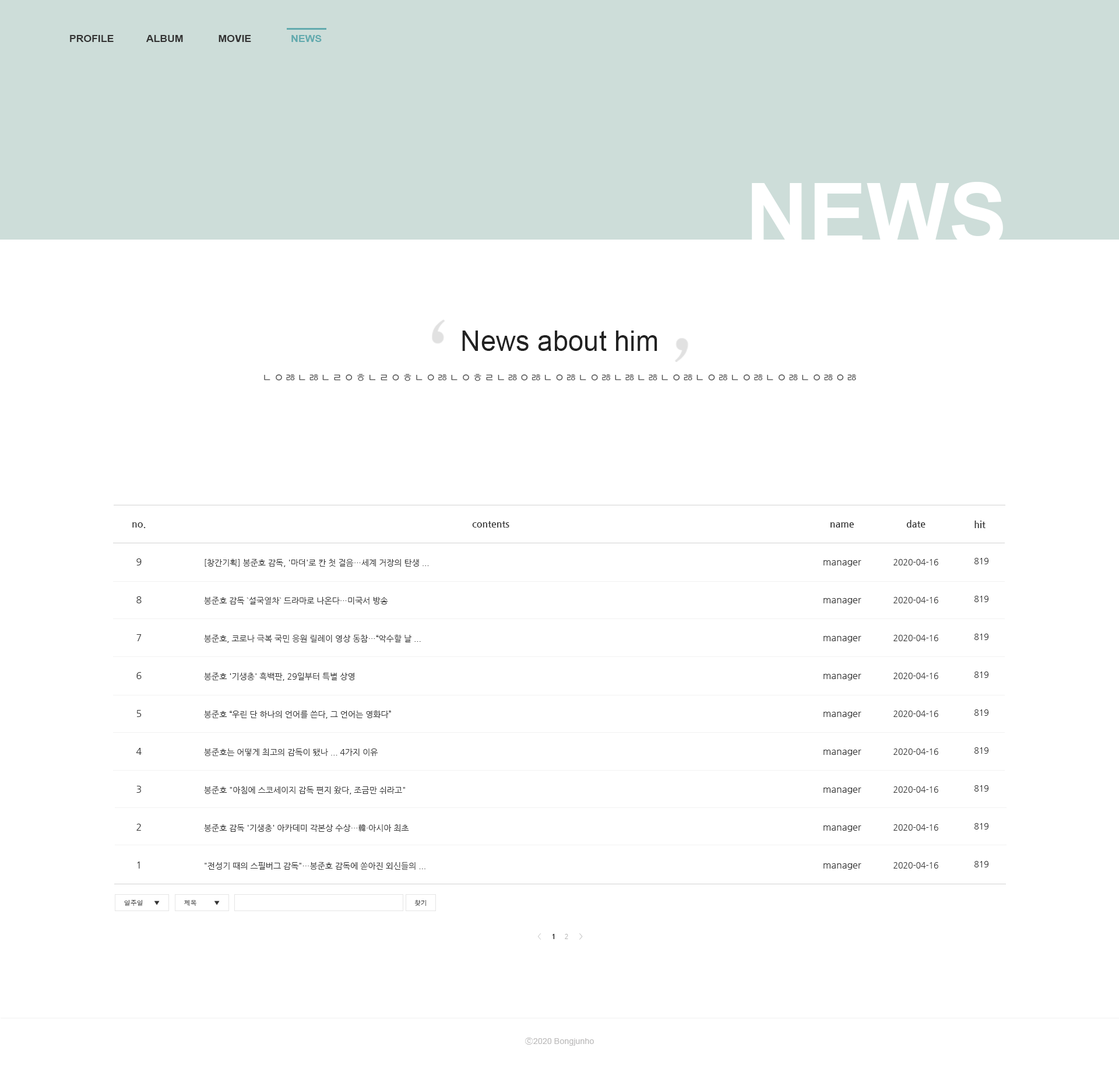
<style>
.page{position:relative;width:1119px;height:1065px;background:#ffffff}
.page>*{position:absolute;margin:0}
.t1{font:10.1px "Arial-BoldMT";color:#333333}
.t2{font:10.1px "Arial-BoldMT";color:#62aaae}
.t3{font:87.5px "Arial-BoldMT";color:#ffffff}
.t4{font:27.7px "ArialMT";color:#222222}
.t5{font:12.4px "NanumGothic";color:#555555}
.t6{font:9.3px "NanumGothicBold";color:#333333}
.t7{font:8.2px/18.9px "NanumGothic";color:#333333}
.t8{font:9.3px/18.9px "NanumGothicBold";color:#333333}
.t9{font:9.3px/17.5px "NanumGothicBold";color:#333333}
.t10{font:9.3px/18.9px "NanumGothic";color:#333333}
.t11{font:6.4px "Dotum";color:#333333}
.t12{font:6.4px "NanumGothic";color:#c8c8c8}
.t13{font:6.4px "NanumGothicExtraBold";color:#333333}
.t14{font:6.4px "NanumGothic";color:#b7b7b7}
.t15{font:6.4px "NanumGothic";color:#bdbdbd}
.t16{font:8.2px "ArialMT";color:#bcbbbb}
.t17{font:8.2px "Gulim";color:#bcbbbb}
</style>
<div class="page">
<p class="t1" style="left:70px;top:35px;width:44px;height:7px">PROFILE</p>
<p class="t1" style="left:146px;top:35px;width:37px;height:7px">ALBUM</p>
<p class="t1" style="left:219px;top:35px;width:32px;height:7px">MOVIE</p>
<p class="t2" style="left:292px;top:35px;width:30px;height:7px">NEWS</p>
<p class="t3" style="left:752px;top:182px;width:251px;height:65px">NEWS</p>
<p class="t4" style="left:462px;top:331px;width:196px;height:20px">News about him</p>
<p class="t5" style="left:264px;top:374px;width:592px;height:7px">ㄴㅇㅀㄴㅀㄴㄹㅇㅎㄴㄹㅇㅎㄴㅇㅀㄴㅇㅎㄹㄴㅀㅇㅀㄴㅇㅀㄴㅇㅀㄴㅀㄴㅀㄴㅇㅀㄴㅇㅀㄴㅇㅀㄴㅇㅀㄴㅇㅀㅇㅀ</p>
<p class="t6" style="left:472px;top:521px;width:38px;height:7px">contents</p>
<p class="t7" style="left:894px;top:520px;width:45px;height:349px;text-align:center"><span class="t8">date<br><br></span>2020-04-16<br><br>2020-04-16<br><br>2020-04-16<br><br>2020-04-16<br><br>2020-04-16<br><br>2020-04-16<br><br>2020-04-16<br><br>2020-04-16<br><br>2020-04-16</p>
<p class="t7" style="left:975px;top:521px;width:14px;height:347px"><span class="t9">hit<br><br></span>819<br><br>819<br><br>819<br><br>819<br><br>819<br><br>819<br><br>819<br><br>819<br><br>819</p>
<p class="t10" style="left:132px;top:522px;width:14px;height:347px;text-align:center"><span class="t8">no.<br></span><br>9<br><br>8<br><br>7<br><br>6<br><br>5<br><br>4<br><br>3<br><br>2<br><br>1</p>
<p class="t10" style="left:824px;top:522px;width:38px;height:348px;text-align:center"><span class="t8">name<br><br></span>manager<br><br>manager<br><br>manager<br><br>manager<br><br>manager<br><br>manager<br><br>manager<br><br>manager<br><br>manager</p>
<p class="t7" style="left:204px;top:559px;width:225px;height:311px">[창간기획] 봉준호 감독, '마더'로 칸 첫 걸음…세계 거장의 탄생 ...<br><br>봉준호 감독 `설국열차` 드라마로 나온다…미국서 방송<br><br>봉준호, 코로나 극복 국민 응원 릴레이 영상 동참…“악수할 날 ...<br><br>봉준호 '기생충' 흑백판, 29일부터 특별 상영<br><br>봉준호 “우린 단 하나의 언어를 쓴다, 그 언어는 영화다”<br><br>봉준호는 어떻게 최고의 감독이 됐나 ... 4가지 이유<br><br>봉준호 "아침에 스코세이지 감독 편지 왔다, 조금만 쉬라고"<br><br>봉준호 감독 '기생충' 아카데미 각본상 수상…韓·아시아 최초<br><br>"전성기 때의 스필버그 감독"…봉준호 감독에 쏟아진 외신들의 ...</p>
<p class="t11" style="left:124px;top:900px;width:36px;height:6px">일주일     ▼</p>
<p class="t11" style="left:184px;top:900px;width:36px;height:6px">제목        ▼</p>
<p class="t11" style="left:415px;top:900px;width:11px;height:6px">찾기</p>
<p class="t12" style="left:538px;top:933px;width:45px;height:7px">&lt;      <span class="t13">1     </span><span class="t14">2      </span><span class="t15">&gt;</span></p>
<p class="t16" style="left:525px;top:1038px;width:69px;height:8px"><span class="t17">ⓒ</span>2020 Bongjunho</p>
</div>
